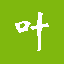
<style>
.page{position:relative;width:64px;height:64px;background:#7fb80e}
.page>*{position:absolute;margin:0}
.t1{font:48px "STXinwei";letter-spacing:-0.05em;color:#ffffff}
</style>
<div class="page">
<p class="t1" style="left:15px;top:12px;width:34px;height:39px">叶</p>
</div>
